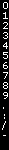
<style>
.page{position:relative;width:9px;height:150px;background:#000000}
.page>*{position:absolute;margin:0}
.t1{font:10px/10px "Verdana";color:#ffffff}
</style>
<div class="page">
<p class="t1" style="left:2px;top:2px;width:6px;height:134px">0<br>1<br>2<br>3<br>4<br>5<br>6<br>7<br>8<br>9<br>.<br>:<br>/<br>-</p>
</div>
